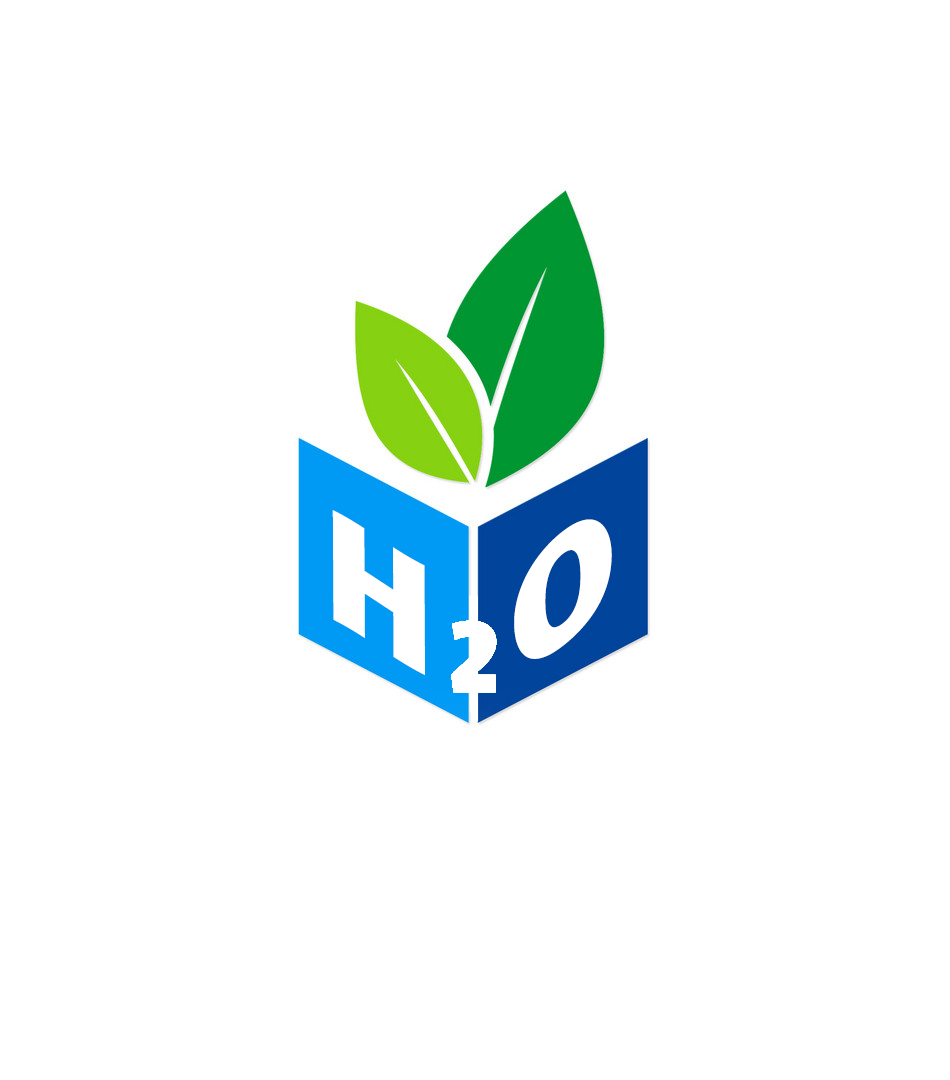
<style>
.page{position:relative;width:950px;height:1080px;background:#ffffff}
.page>*{position:absolute;margin:0}
.t1{font:158.3px "Candal";letter-spacing:0.02em;color:#ffffff;scale:0.9 1}
</style>
<div class="page">
<p class="t1" style="left:332px;top:510px;width:93px;height:165px">H</p>
<p class="t1" style="left:514px;top:519px;width:98px;height:140px">O</p>
</div>
